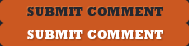
<style>
.page{position:relative;width:189px;height:46px;background:#cb5821}
.page>*{position:absolute;margin:0}
.t1{font:12px "Rockwell-ExtraBold";letter-spacing:0.01em;color:#25272e;text-transform:uppercase}
.t2{font:12px "Rockwell-ExtraBold";letter-spacing:0.01em;color:#ffffff;text-transform:uppercase}
</style>
<div class="page">
<p class="t1" style="left:27px;top:7px;width:136px;height:9px">Submit Comment</p>
<p class="t2" style="left:27px;top:30px;width:136px;height:9px">Submit Comment</p>
</div>
